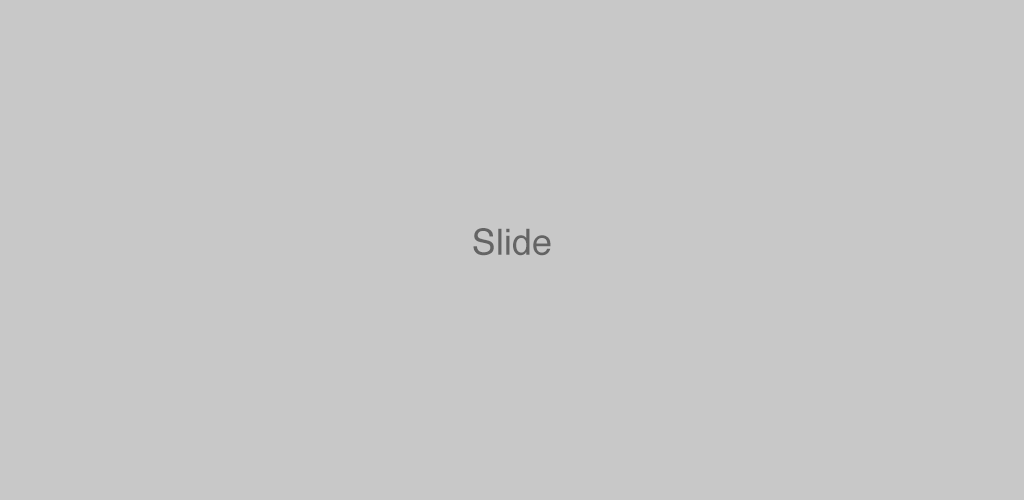
<style>
.page{position:relative;width:1024px;height:500px;background:#c8c8c8}
.page>*{position:absolute;margin:0}
.t1{font:36px "Helvetica";color:#646464}
</style>
<div class="page">
<p class="t1" style="left:473px;top:228px;width:78px;height:28px">Slide</p>
</div>
